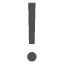
<style>
.page{position:relative;width:64px;height:64px;background:#ffffff}
.page>*{position:absolute;margin:0}
.t1{font:76.4px "MicrosoftYaHei";color:#505050;scale:0.97 1}
</style>
<div class="page">
<p class="t1" style="left:27px;top:2px;width:10px;height:60px">！</p>
</div>
